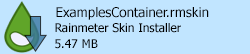
<style>
.page{position:relative;width:250px;height:54px;background:#c1e5ff}
.page>*{position:absolute;margin:0}
.t1{font:13.3px "Tahoma";color:#000000}
.t2{font:12px "Tahoma";color:#000000}
</style>
<div class="page">
<p class="t1" style="left:56px;top:7px;width:153px;height:13px">ExamplesContainer.rmskin</p>
<p class="t2" style="left:55px;top:23px;width:126px;height:10px">Rainmeter Skin Installer</p>
<p class="t2" style="left:55px;top:39px;width:43px;height:10px">5.47 MB</p>
</div>
